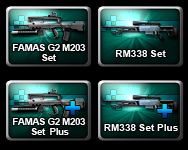
<style>
.page{position:relative;width:188px;height:150px;background:#000000}
.page>*{position:absolute;margin:0}
.t1{font:10px/10px "Arial-BoldMT";letter-spacing:-0.05em;color:#ffffff}
.t2{font:10px "Arial-BoldMT";color:#ffffff}
.t3{font:28px "Arial-Black"}
</style>
<div class="page">
<p class="t1" style="left:12px;top:44px;width:74px;height:17px;text-align:center">FAMAS G2 M203 <br>Set</p>
<p class="t2" style="left:115px;top:50px;width:51px;height:7px">RM338 Set</p>
<p class="t3" style="left:65px;top:101px;width:16px;height:14px">+</p>
<p class="t3" style="left:157px;top:104px;width:16px;height:14px">+</p>
<p class="t1" style="left:12px;top:118px;width:74px;height:17px;text-align:center">FAMAS G2 M203 <br>Set  Plus</p>
<p class="t2" style="left:104px;top:124px;width:74px;height:7px">RM338 Set Plus</p>
</div>
